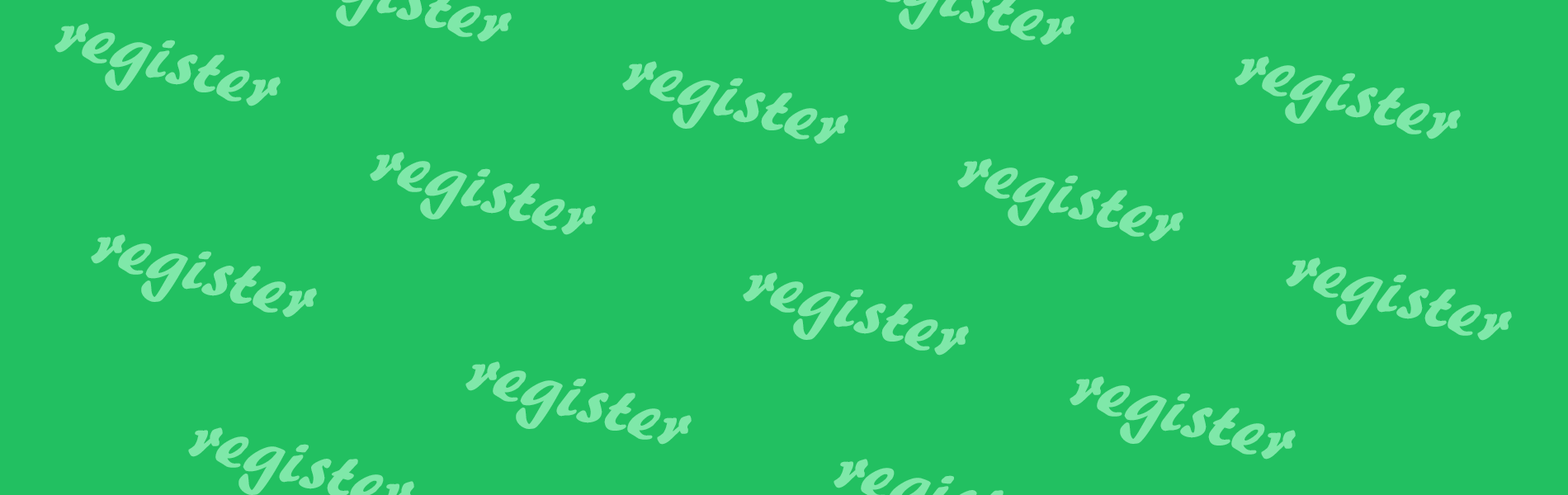
<style>
.page{position:relative;width:1568px;height:495px;background:#22c061}
.page>*{position:absolute;margin:0}
.t1{font:82.5px "ARBERKLEY";color:#7fe8a9}
</style>
<div class="page">
<p class="t1" style="left:54px;top:23px;width:227px;height:83px;rotate:16deg">register</p>
<p class="t1" style="left:622px;top:61px;width:226px;height:83px;rotate:16deg">register</p>
<p class="t1" style="left:1235px;top:56px;width:226px;height:83px;rotate:16deg">register</p>
<p class="t1" style="left:370px;top:152px;width:226px;height:83px;rotate:16deg">register</p>
<p class="t1" style="left:957px;top:158px;width:226px;height:84px;rotate:16deg">register</p>
<p class="t1" style="left:91px;top:234px;width:226px;height:84px;rotate:16deg">register</p>
<p class="t1" style="left:1286px;top:257px;width:226px;height:84px;rotate:16deg">register</p>
<p class="t1" style="left:743px;top:272px;width:226px;height:84px;rotate:16deg">register</p>
<p class="t1" style="left:465px;top:361px;width:227px;height:84px;rotate:16deg">register</p>
<p class="t1" style="left:1070px;top:376px;width:226px;height:84px;rotate:16deg">register</p>
</div>
